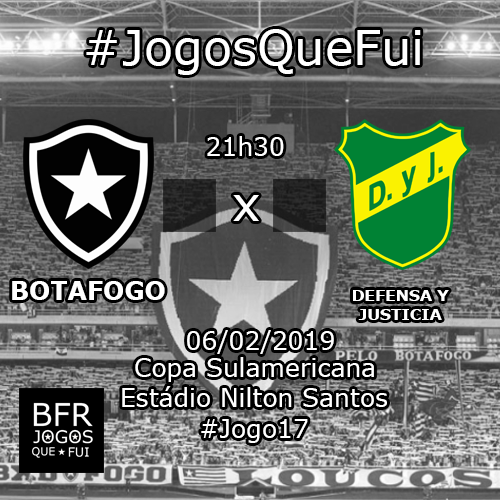
<style>
.page{position:relative;width:500px;height:500px}
.page>*{position:absolute;margin:0}
.t1{font:48px "Verdana";color:#ffffff}
.t2{font:25px "Verdana";color:#ffffff}
.t3{font:25px "Verdana-Bold";color:#ffffff}
.t4{font:15.4px "Verdana-Bold";color:#ffffff}
</style>
<div class="page">
<p class="t1" style="left:86px;top:29px;width:335px;height:46px">#JogosQueFui</p>
<p class="t2" style="left:207px;top:136px;width:77px;height:20px">21h30</p>
<p class="t1" style="left:233px;top:195px;width:26px;height:26px">x</p>
<p class="t3" style="left:12px;top:281px;width:153px;height:19px">BOTAFOGO</p>
<p class="t4" style="left:353px;top:290px;width:96px;height:30px;text-align:center">DEFENSA Y <br>JUSTICIA</p>
<p class="t2" style="left:187px;top:330px;width:147px;height:24px">06/02/2019</p>
<p class="t2" style="left:135px;top:357px;width:239px;height:25px">Copa Sulamericana</p>
<p class="t2" style="left:122px;top:386px;width:265px;height:21px">Estádio Nilton Santos</p>
<p class="t2" style="left:201px;top:419px;width:107px;height:24px">#Jogo17</p>
</div>
